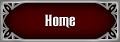
<style>
.page{position:relative;width:120px;height:42px}
.page>*{position:absolute;margin:0}
.t1{font:16px "Ravenscroft";color:#ffffff;scale:1.8 1}
</style>
<div class="page">
<p class="t1" style="left:45px;top:14px;width:30px;height:14px">Home</p>
</div>
